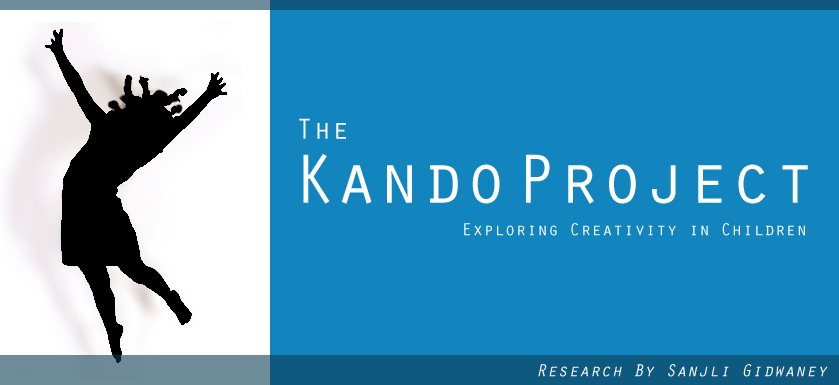
<style>
.page{position:relative;width:839px;height:385px;background:#1285be}
.page>*{position:absolute;margin:0}
.t1{font:30px "OratorStd";color:#ffffff}
.t2{font:72px "OratorStd";color:#ffffff}
.t3{font:18px "OratorStd";color:#ffffff}
.t4{font:18px "OratorStd-Slanted";color:#ffffff}
</style>
<div class="page">
<p class="t1" style="left:299px;top:118px;width:47px;height:21px">The</p>
<p class="t2" style="left:303px;top:153px;width:505px;height:51px">Kando Project</p>
<p class="t3" style="left:464px;top:223px;width:341px;height:13px">Exploring Creativity in Children</p>
<p class="t4" style="left:538px;top:364px;width:290px;height:13px">Research By Sanjli Gidwaney</p>
</div>
